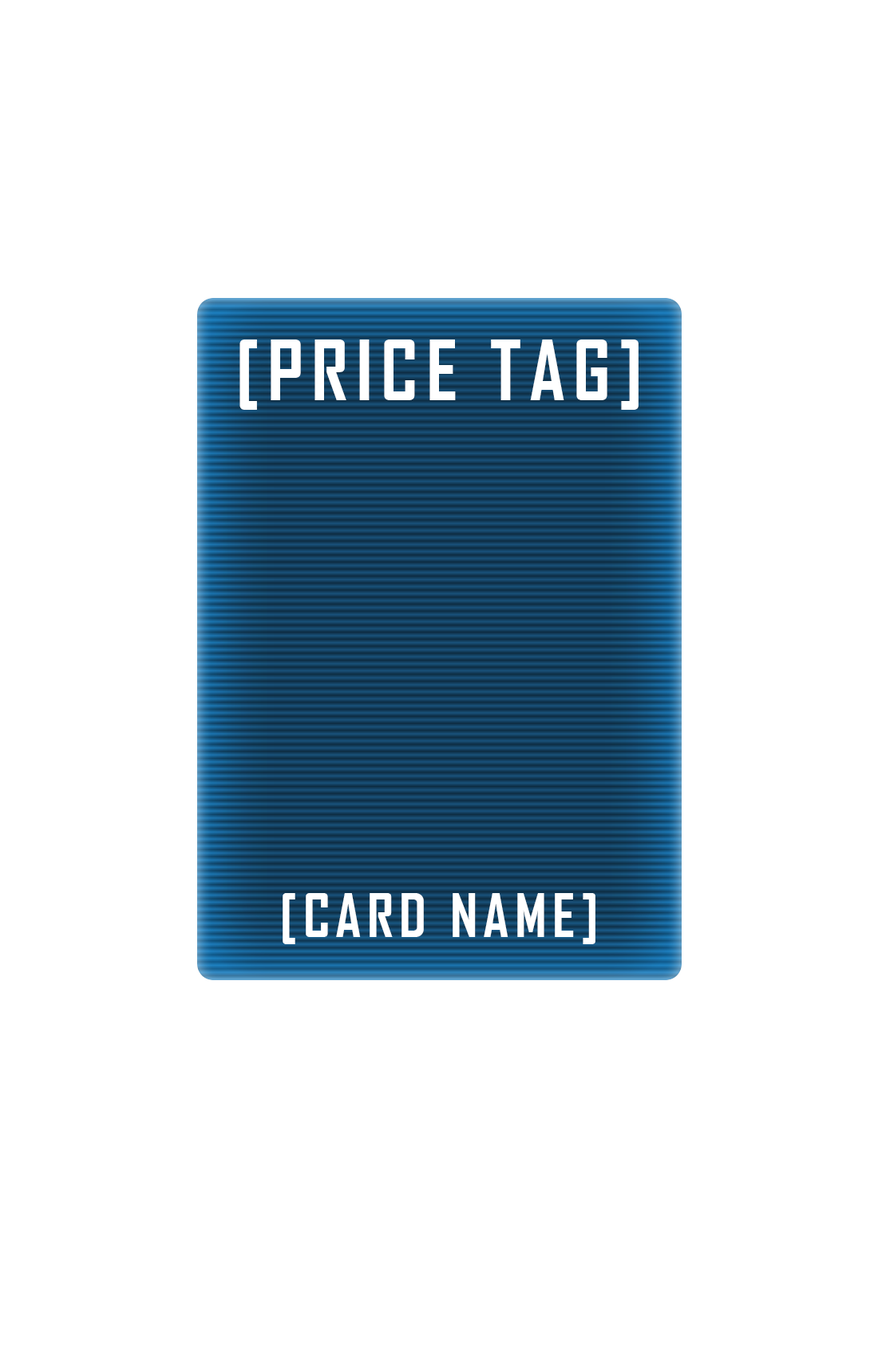
<style>
.page{position:relative;width:878px;height:1358px;background:#ffffff}
.page>*{position:absolute;margin:0}
.t1{font:79.9px "AgencyFB-Bold";letter-spacing:0.1em;color:#ffffff}
.t2{font:57.5px "AgencyFB-Bold";letter-spacing:0.1em;color:#ffffff}
</style>
<div class="page">
<p class="t1" style="left:240px;top:339px;width:399px;height:71px">[PRICE TAG]</p>
<p class="t2" style="left:283px;top:893px;width:313px;height:51px">[CARD NAME]</p>
</div>
